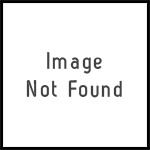
<style>
.page{position:relative;width:150px;height:150px;background:#ffffff}
.page>*{position:absolute;margin:0}
.t1{font:24px "ZagBold";letter-spacing:0.075em;color:#424242}
</style>
<div class="page">
<p class="t1" style="left:26px;top:52px;width:96px;height:46px;text-align:center">Image<br>Not Found</p>
</div>
